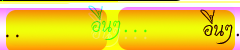
<style>
.page{position:relative;width:240px;height:50px}
.page>*{position:absolute;margin:0}
.t1{font:28px "THCharmonman";color:#40fe08}
</style>
<div class="page">
<p class="t1" style="left:88px;top:5px;width:59px;height:35px">อื่นๆ...</p>
</div>
